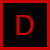
<style>
.page{position:relative;width:50px;height:50px;background:#040404}
.page>*{position:absolute;margin:0}
.t1{font:27.6px "LucidaGrande";color:#c70505}
</style>
<div class="page">
<p class="t1" style="left:16px;top:15px;width:18px;height:20px">D</p>
</div>
